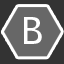
<style>
.page{position:relative;width:64px;height:64px;background:#676767}
.page>*{position:absolute;margin:0}
.t1{font:36px "BellGothicStd-Bold";color:#ffffff}
</style>
<div class="page">
<p class="t1" style="left:24px;top:17px;width:18px;height:27px">B</p>
</div>
